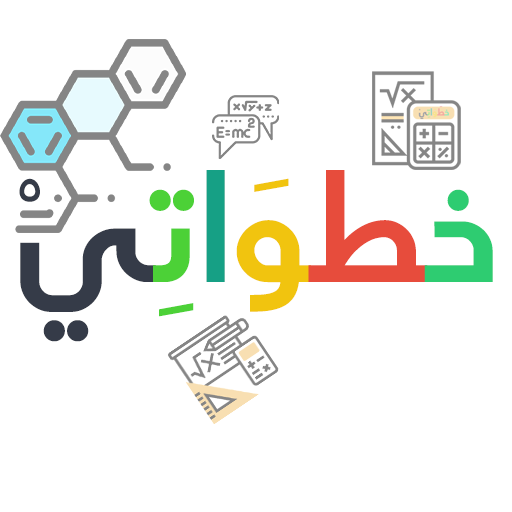
<style>
.page{position:relative;width:512px;height:512px;background:#ffffff}
.page>*{position:absolute;margin:0}
.t1{font:141.3px "Questv1-Bold";color:#f1c40f}
.t2{font:141.3px "Questv1-Bold";color:#2ecc71}
.t3{font:141.3px "Questv1-Bold";color:#e74c3c}
.t4{font:141.3px "Questv1-Bold";color:#16a085}
.t5{font:141.3px "Questv1-Bold";color:#4cd137}
.t6{font:141.3px "Questv1-Bold";color:#353b48}
.t7{font:141.3px "MyriadArabic-Regular";color:#353b48}
</style>
<div class="page">
<p class="t1" style="left:19px;top:170px;width:474px;height:172px"><span class="t2">خ</span><span class="t3">ط</span>وَ<span class="t4">ا</span><span class="t5">تِ</span><span class="t6">ي</span><span class="t7">ْ</span></p>
</div>
